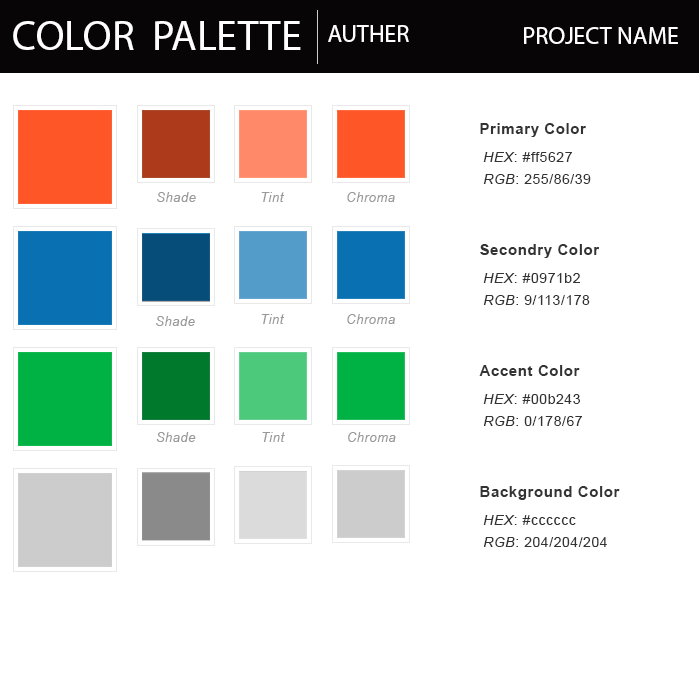
<style>
.page{position:relative;width:700px;height:700px;background:#ffffff}
.page>*{position:absolute;margin:0}
.t1{font:42px "MyriadPro-Regular";color:#ffffff;text-transform:uppercase}
.t2{font:24px "MyriadPro-Regular";color:#ffffff;text-transform:uppercase}
.t3{font:15px "Arial-BoldMT";letter-spacing:0.04em;color:#333333}
.t4{font:14px/22px "ArialMT";letter-spacing:0.04em;color:#333333}
.t5{font:14px/22px "Arial-ItalicMT";letter-spacing:0.04em;color:#333333}
.t6{font:13px "Arial-ItalicMT";letter-spacing:0.04em;color:#999999}
</style>
<div class="page">
<p class="t1" style="left:13px;top:21px;width:288px;height:29px">Color  Palette</p>
<p class="t2" style="left:328px;top:25px;width:81px;height:17px">Auther</p>
<p class="t2" style="left:524px;top:27px;width:154px;height:17px">Project Name</p>
<p class="t3" style="left:480px;top:123px;width:106px;height:14px">Primary Color</p>
<p class="t4" style="left:483px;top:152px;width:108px;height:32px"><span class="t5">HEX</span>: #ff5627<br><span class="t5">RGB</span>: 255/86/39</p>
<p class="t6" style="left:157px;top:192px;width:39px;height:10px">Shade</p>
<p class="t6" style="left:261px;top:192px;width:24px;height:10px">Tint</p>
<p class="t6" style="left:347px;top:192px;width:48px;height:10px">Chroma</p>
<p class="t3" style="left:480px;top:244px;width:120px;height:14px">Secondry Color</p>
<p class="t4" style="left:483px;top:273px;width:107px;height:32px"><span class="t5">HEX</span>: #0971b2<br><span class="t5">RGB</span>: 9/113/178</p>
<p class="t6" style="left:156px;top:316px;width:39px;height:10px">Shade</p>
<p class="t6" style="left:261px;top:314px;width:24px;height:10px">Tint</p>
<p class="t6" style="left:347px;top:314px;width:48px;height:10px">Chroma</p>
<p class="t3" style="left:479px;top:365px;width:101px;height:11px">Accent Color</p>
<p class="t4" style="left:483px;top:394px;width:99px;height:32px"><span class="t5">HEX</span>: #00b243<br><span class="t5">RGB</span>: 0/178/67</p>
<p class="t6" style="left:156px;top:432px;width:40px;height:10px">Shade</p>
<p class="t6" style="left:262px;top:432px;width:23px;height:10px">Tint</p>
<p class="t6" style="left:348px;top:432px;width:48px;height:10px">Chroma</p>
<p class="t3" style="left:480px;top:486px;width:140px;height:14px">Background Color</p>
<p class="t4" style="left:483px;top:515px;width:124px;height:32px"><span class="t5">HEX</span>: #cccccc<br><span class="t5">RGB</span>: 204/204/204</p>
</div>
